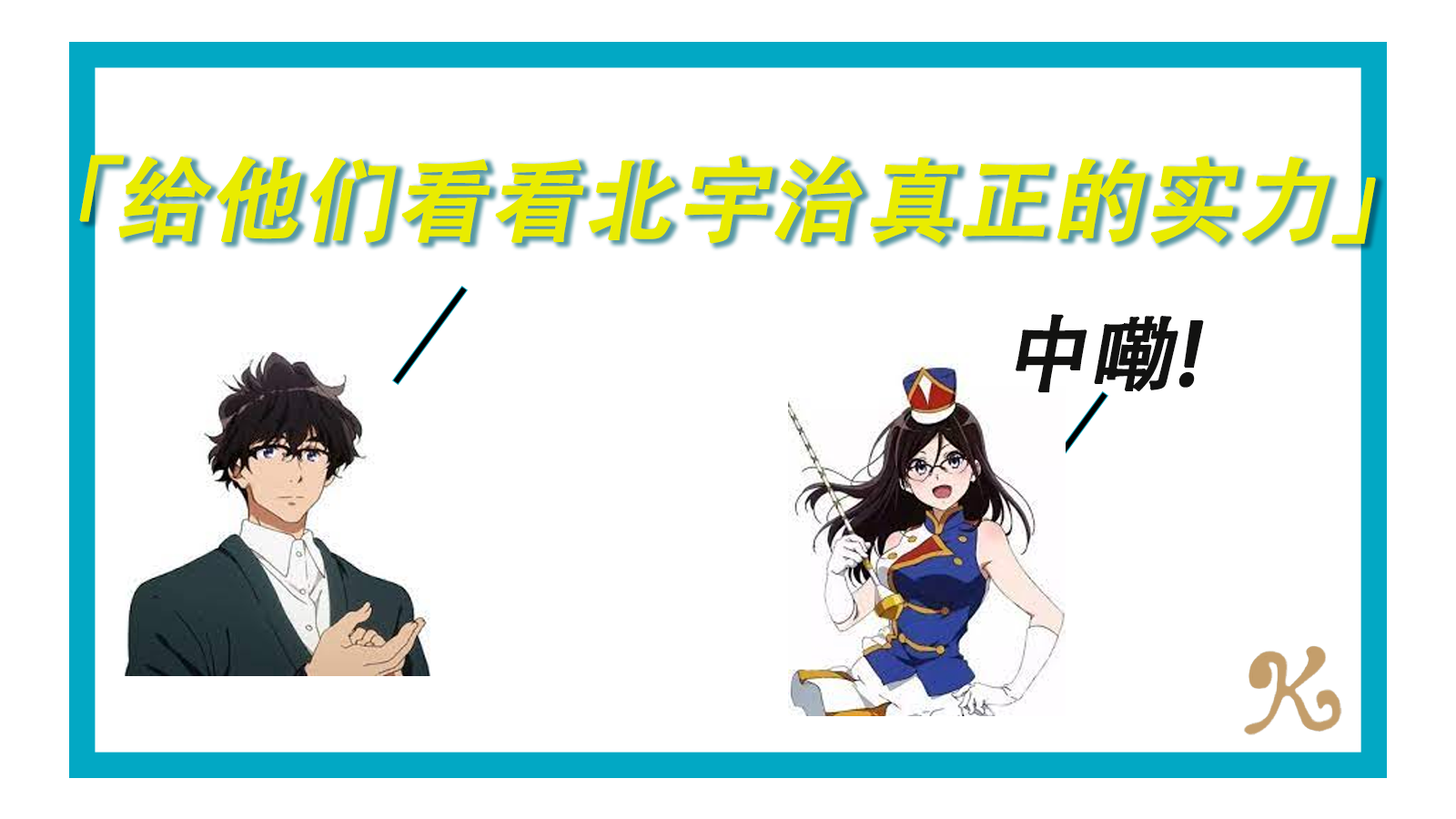
<style>
.page{position:relative;width:1456px;height:819px;background:#ffffff}
.page>*{position:absolute;margin:0}
.t1{font:91px "AdobeHeitiStd-Regular";color:#e9ec00;font-weight:bold;font-style:italic}
.t2{font:83.4px "AdobeHeitiStd-Regular";color:#121211;font-weight:bold;font-style:italic}
</style>
<div class="page">
<p class="t1" style="left:79px;top:155px;width:1297px;height:89px">「给他们看看北宇治真正的实力」</p>
<p class="t2" style="left:1016px;top:314px;width:188px;height:79px">中嘞！</p>
</div>
